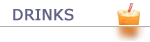
<style>
.page{position:relative;width:150px;height:42px;background:#ffffff}
.page>*{position:absolute;margin:0}
.t1{font:15px "Verdana";color:#636388;font-weight:bold}
</style>
<div class="page">
<p class="t1" style="left:13px;top:8px;width:61px;height:13px">DRINKS</p>
</div>
